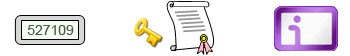
<style>
.page{position:relative;width:350px;height:56px;background:#ffffff}
.page>*{position:absolute;margin:0}
.t1{font:14px "ArialMT";color:#535752}
</style>
<div class="page">
<p class="t1" style="left:27px;top:25px;width:47px;height:10px">527109</p>
</div>
